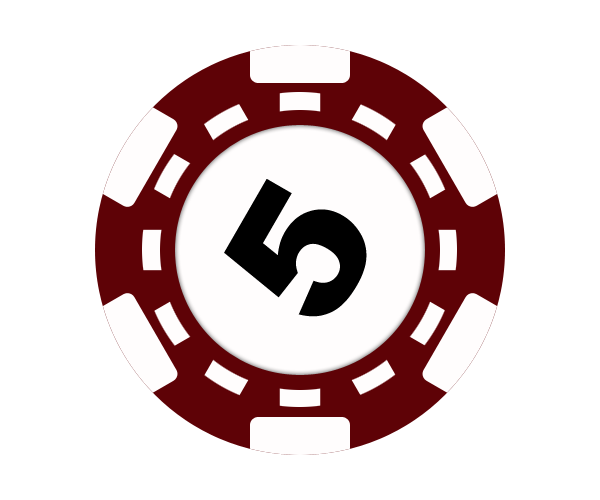
<style>
.page{position:relative;width:600px;height:500px;background:#ffffff}
.page>*{position:absolute;margin:0}
.t1{font:180px "Arial-Black";color:#000000}
</style>
<div class="page">
<p class="t1" style="left:224px;top:179px;width:143px;height:138px;rotate:-60deg">5</p>
</div>
